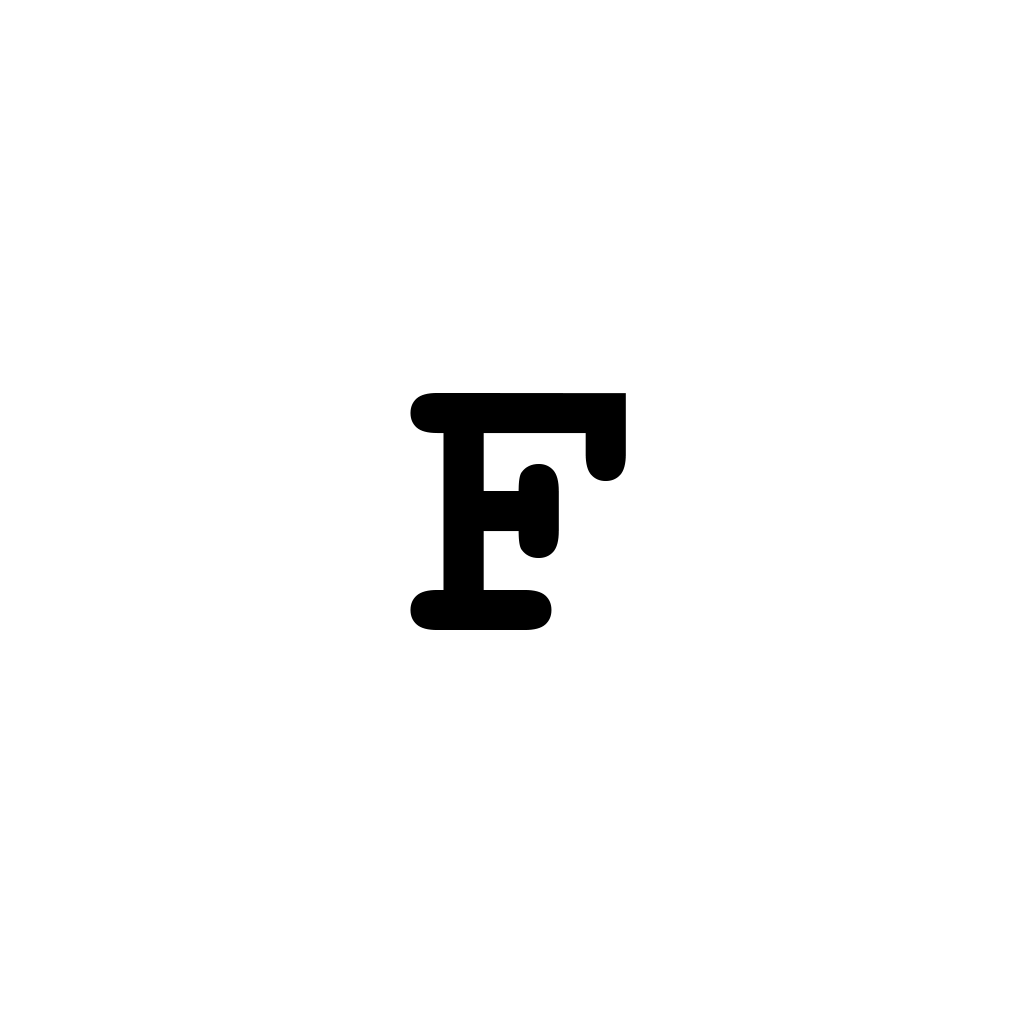
<style>
.page{position:relative;width:1024px;height:1024px;background:#ffffff}
.page>*{position:absolute;margin:0}
.t1{font:400px "CourierNewPS-BoldMT";color:#000000}
</style>
<div class="page">
<p class="t1" style="left:410px;top:393px;width:216px;height:237px">F</p>
</div>
